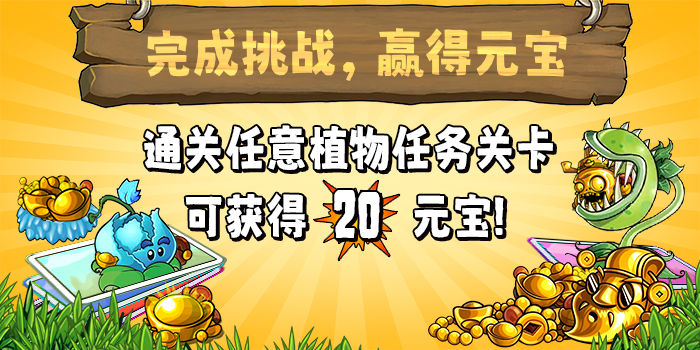
<style>
.page{position:relative;width:700px;height:350px}
.page>*{position:absolute;margin:0}
.t1{font:54.1px "MaokenAssortedSansBold-Regular";color:#ffd86b}
.t2{font:54.1px "NishikitekiBold-Regular";color:#ffd86b}
.t3{font:50.5px/67.9px "MaokenAssortedSansBold-Regular";color:#ffffff;scale:0.91 1}
.t4{font:50.5px/67.9px "HouseofTerror";color:#ffffff;scale:0.91 1}
.t5{font:72.4px "HouseofTerror";color:#ffffff;scale:0.75 1}
</style>
<div class="page">
<p class="t1" style="left:147px;top:28px;width:420px;height:53px">完成挑战<span class="t2">，</span>赢得元宝</p>
<p class="t3" style="left:144px;top:125px;width:409px;height:113px;text-align:center">通关任意植物任务关卡<br>可获得         元宝<span class="t4">!</span></p>
<p class="t5" style="left:334px;top:190px;width:46px;height:49px">20</p>
</div>
